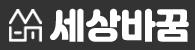
<style>
.page{position:relative;width:195px;height:50px;background:#333333}
.page>*{position:absolute;margin:0}
.t1{font:35px "Jalnan";color:#ffffff;text-transform:uppercase}
</style>
<div class="page">
<p class="t1" style="left:50px;top:8px;width:139px;height:34px">세상바꿈</p>
</div>
